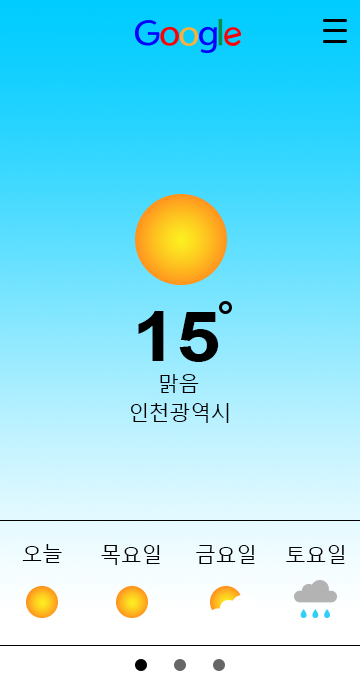
<style>
.page{position:relative;width:360px;height:693px}
.page>*{position:absolute;margin:0}
.t1{font:70px "Arial-BoldMT";color:#000000;scale:1.14 1}
.t2{font:20.6px "MalgunGothic";color:#000000}
</style>
<div class="page">
<p class="t1" style="left:138px;top:311px;width:81px;height:51px">15</p>
<p class="t2" style="left:160px;top:374px;width:39px;height:19px">맑음</p>
<p class="t2" style="left:131px;top:403px;width:98px;height:20px">인천광역시</p>
<p class="t2" style="left:22px;top:544px;width:40px;height:19px">오늘</p>
<p class="t2" style="left:101px;top:545px;width:59px;height:20px">목요일</p>
<p class="t2" style="left:196px;top:545px;width:59px;height:19px">금요일</p>
<p class="t2" style="left:286px;top:545px;width:59px;height:19px">토요일</p>
</div>
